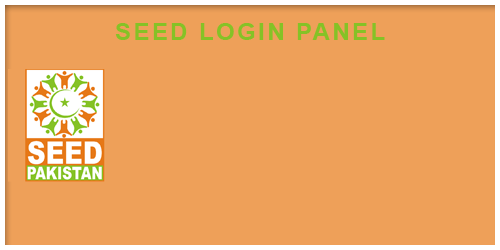
<style>
.page{position:relative;width:500px;height:250px;background:#eea059}
.page>*{position:absolute;margin:0}
.t1{font:24px "Arial-BoldMT";letter-spacing:0.1em;color:#85c226;text-transform:uppercase}
</style>
<div class="page">
<p class="t1" style="left:115px;top:23px;width:270px;height:17px">SEED LOGIN PANEL</p>
</div>
